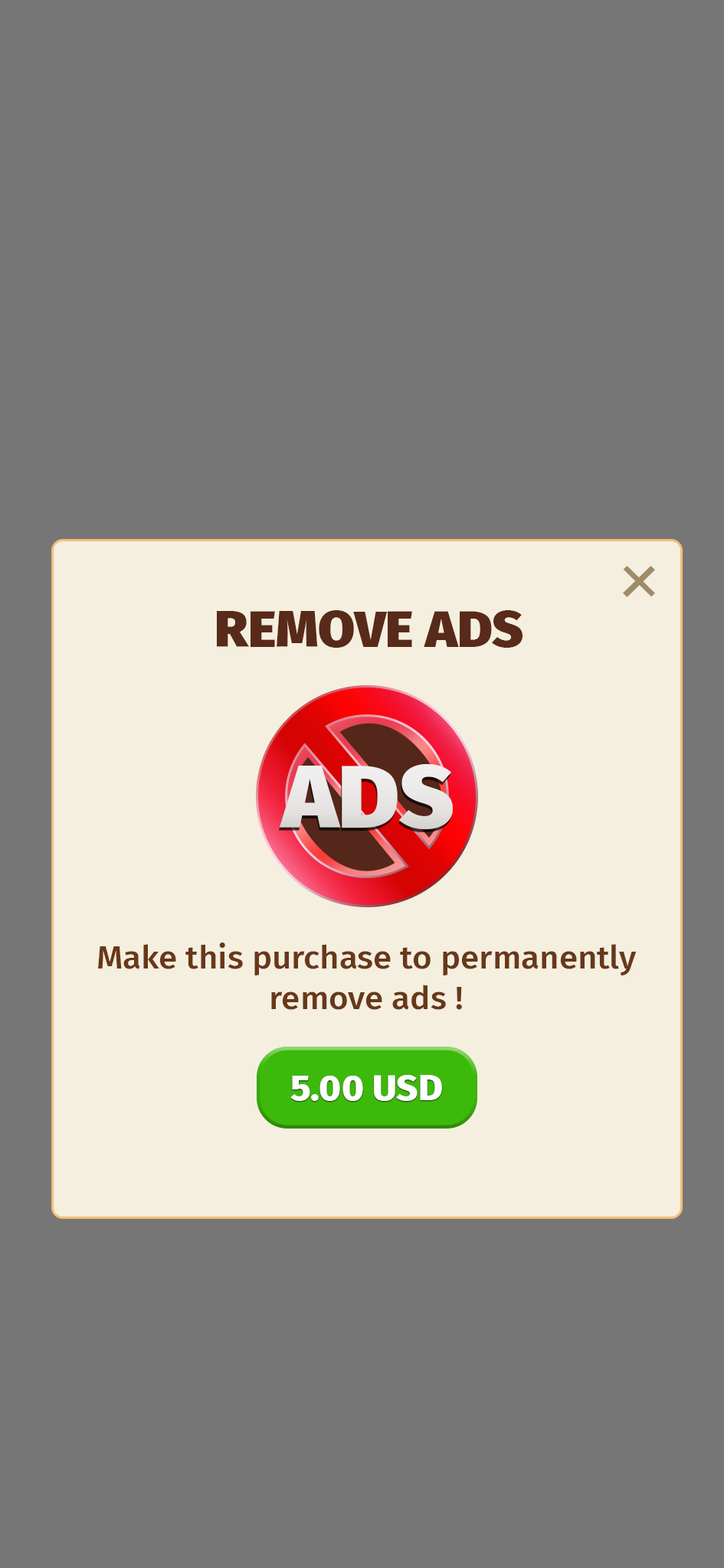
<style>
.page{position:relative;width:724px;height:1568px;background:#767676}
.page>*{position:absolute;margin:0}
.t1{font:50.8px "FiraSans-Black";color:#582a19;scale:1.05 1}
.t2{font:88.7px "FiraSans-Black";color:#e9e8e7;scale:1.05 1}
.t3{font:32px "FiraSans-Medium";color:#68381a;scale:1.05 1}
.t4{font:35.6px "FiraSans-ExtraBold";color:#ffffff;scale:1.05 1}
</style>
<div class="page">
<p class="t1" style="left:217px;top:610px;width:305px;height:38px">REMOVE ADS</p>
<p class="t2" style="left:279px;top:764px;width:173px;height:65px">ADS</p>
<p class="t3" style="left:98px;top:942px;width:538px;height:68px;text-align:center">Make this purchase to permanently<br>remove ads !</p>
<p class="t4" style="left:290px;top:1075px;width:152px;height:26px">5.00 USD</p>
</div>
